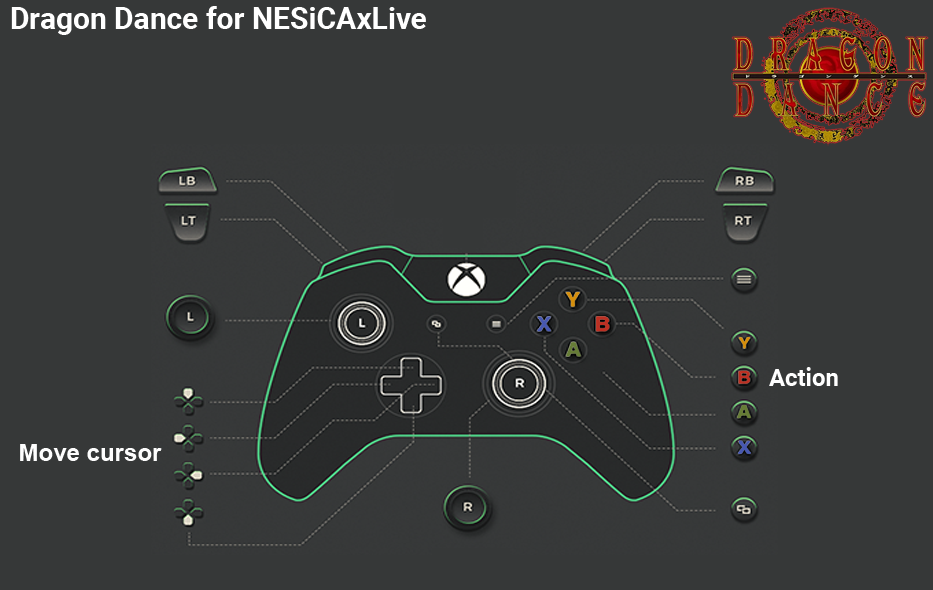
<style>
.page{position:relative;width:933px;height:590px;background:#363838}
.page>*{position:absolute;margin:0}
.t1{font:30px "Roboto-Bold";color:#ffffff}
.t2{font:24px "Roboto-Bold";color:#ffffff}
.t3{font:24px "Arial-BoldMT";color:#fefefe}
</style>
<div class="page">
<p class="t1" style="left:11px;top:6px;width:415px;height:29px">Dragon Dance for NESiCAxLive</p>
<p class="t2" style="left:769px;top:367px;width:69px;height:19px">Action</p>
<p class="t3" style="left:20px;top:444px;width:142px;height:17px">Move cursor</p>
</div>
